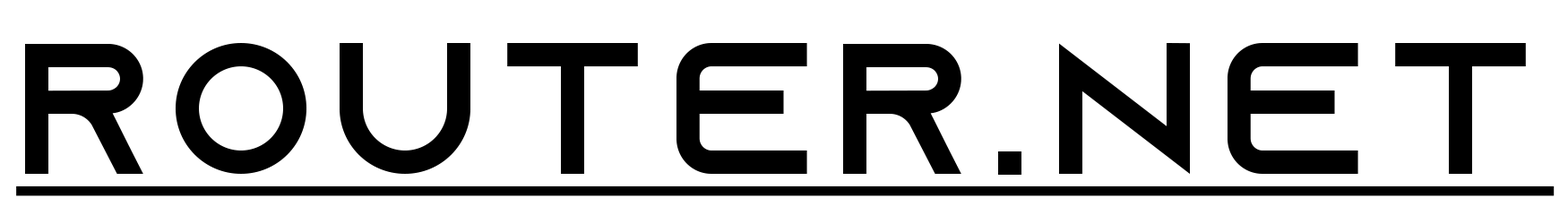
<style>
.page{position:relative;width:1568px;height:224px;background:#ffffff}
.page>*{position:absolute;margin:0}
.t1{font:186.7px "AzonixRegular";letter-spacing:0.1em;color:#000000;text-decoration:underline}
</style>
<div class="page">
<p class="t1" style="left:16px;top:43px;width:1539px;height:153px">router.net</p>
</div>
